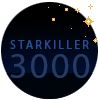
<style>
.page{position:relative;width:100px;height:100px;background:#ffffff}
.page>*{position:absolute;margin:0}
.t1{font:12px "MyriadPro-Regular";letter-spacing:0.2em;color:#254e95}
.t2{font:36px "MyriadPro-Regular";letter-spacing:0.075em;color:#233b65}
</style>
<div class="page">
<p class="t1" style="left:10px;top:40px;width:79px;height:9px">STARKILLER</p>
<p class="t2" style="left:10px;top:54px;width:80px;height:24px">3000</p>
</div>
